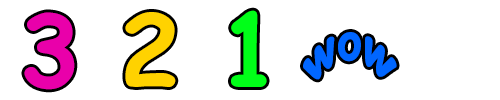
<style>
.page{position:relative;width:500px;height:100px;background:#ffffff}
.page>*{position:absolute;margin:0}
.t1{font:100px "ComicSansMS-Bold";color:#e900aa}
.t2{font:100px "ComicSansMS-Bold";color:#ffd200}
.t3{font:100px "ComicSansMS-Bold";color:#00ff18}
.t4{font:51.8px "ComicSansMS-Bold";color:#0066ff;scale:0.61 1}
</style>
<div class="page">
<p class="t1" style="left:24px;top:12px;width:51px;height:78px">3</p>
<p class="t2" style="left:125px;top:12px;width:51px;height:75px">2</p>
<p class="t3" style="left:231px;top:10px;width:36px;height:77px">1</p>
<p class="t4" style="left:303px;top:32px;width:94px;height:48px">wow</p>
</div>
